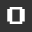
<style>
.page{position:relative;width:32px;height:32px;background:#333333}
.page>*{position:absolute;margin:0}
.t1{font:20px "PressStart2P-Regular";color:#ffffff}
</style>
<div class="page">
<p class="t1" style="left:7px;top:7px;width:18px;height:17px">O</p>
</div>
